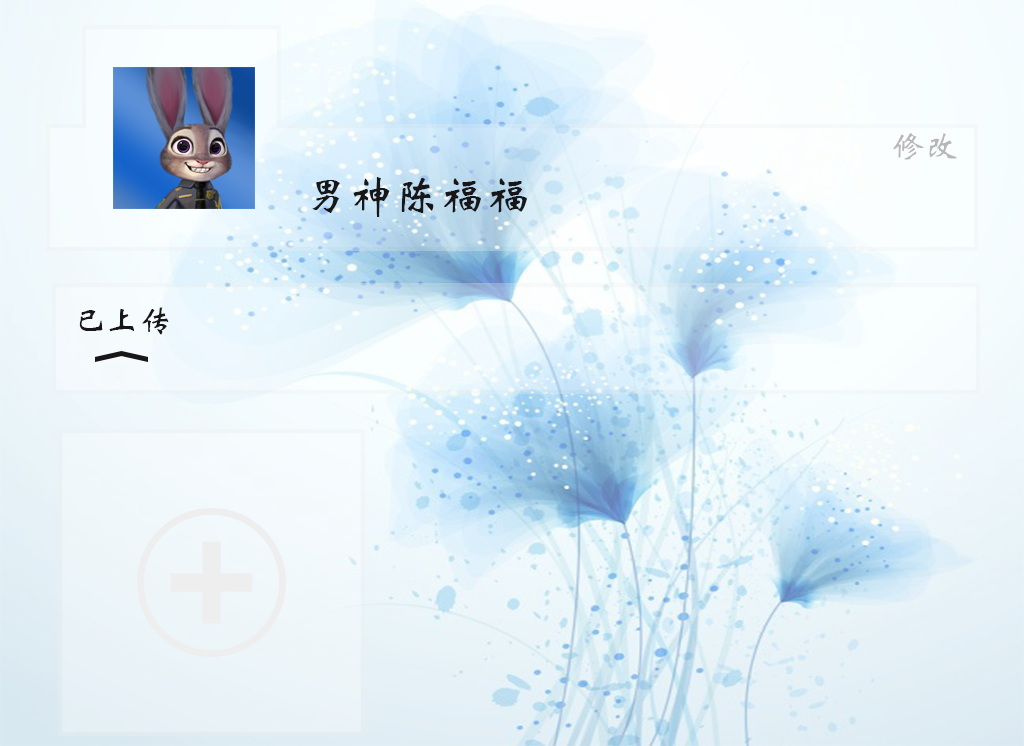
<style>
.page{position:relative;width:1024px;height:746px}
.page>*{position:absolute;margin:0}
.t1{font:33.3px "STXinwei";color:#b8b6b6}
.t2{font:45.8px "STXinwei";color:#181616}
.t3{font:33.3px "STXinwei";color:#181616}
</style>
<div class="page">
<p class="t1" style="left:893px;top:133px;width:64px;height:27px">修改</p>
<p class="t2" style="left:312px;top:177px;width:215px;height:40px">男神陈福福</p>
<p class="t3" style="left:79px;top:307px;width:90px;height:28px">已上传</p>
</div>
